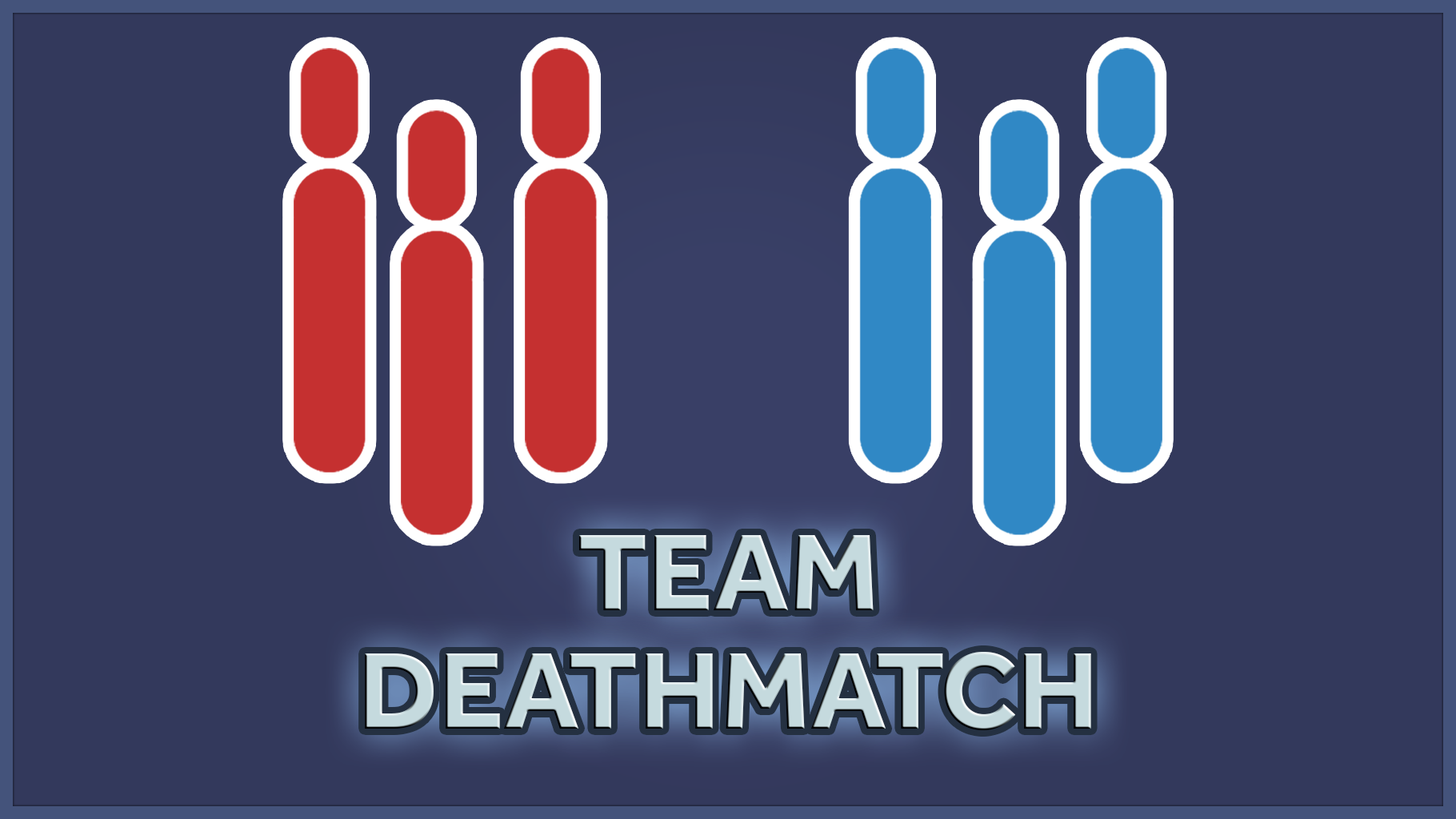
<style>
.page{position:relative;width:1456px;height:819px;background:#33395c}
.page>*{position:absolute;margin:0}
.t1{font:113px "Effra-Bold";color:#c5dade}
</style>
<div class="page">
<p class="t1" style="left:578px;top:535px;width:295px;height:75px">TEAM</p>
<p class="t1" style="left:365px;top:652px;width:726px;height:78px">DEATHMATCH</p>
</div>
